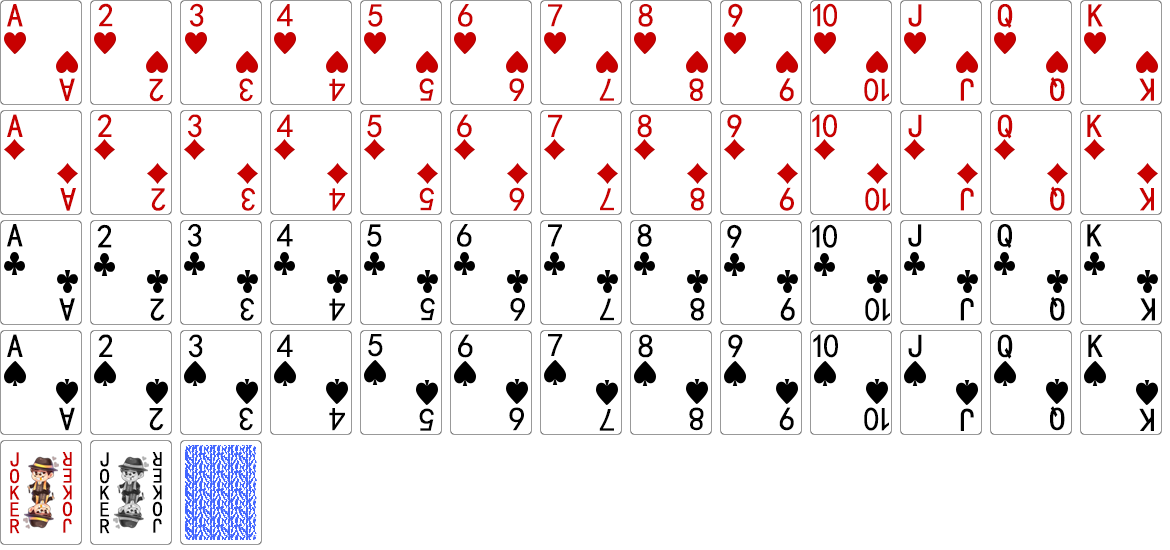
<style>
.page{position:relative;width:1170px;height:550px;background:#ffffff}
.page>*{position:absolute;margin:0}
.t1{font:33px "SimHei";color:#c80101}
.t2{font:33px "SimHei";letter-spacing:-0.14em;color:#c80101}
.t3{font:33px "SimHei";letter-spacing:-0.12em;color:#c80101}
.t4{font:33px "SimHei";color:#000000}
.t5{font:33px "SimHei";letter-spacing:-0.12em;color:#000000}
.t6{font:32.8px "SimHei";color:#000000}
.t7{font:20.8px/16.7px "SimHei";color:#c80101}
.t8{font:20.9px/16.7px "SimHei";color:#c80101}
.t9{font:20.8px/16.7px "SimHei";color:#000000}
.t10{font:20.9px/16.7px "SimHei";color:#000000}
</style>
<div class="page">
<p class="t1" style="left:7px;top:4px;width:16px;height:23px">A</p>
<p class="t1" style="left:98px;top:3px;width:15px;height:24px">2</p>
<p class="t1" style="left:189px;top:3px;width:15px;height:24px">3</p>
<p class="t1" style="left:277px;top:4px;width:16px;height:23px">4</p>
<p class="t1" style="left:368px;top:4px;width:15px;height:23px">5</p>
<p class="t1" style="left:458px;top:4px;width:15px;height:23px">6</p>
<p class="t1" style="left:548px;top:4px;width:15px;height:23px">7</p>
<p class="t1" style="left:638px;top:4px;width:15px;height:23px">8</p>
<p class="t1" style="left:728px;top:3px;width:15px;height:24px">9</p>
<p class="t2" style="left:813px;top:3px;width:24px;height:24px">10</p>
<p class="t1" style="left:908px;top:4px;width:14px;height:23px">J</p>
<p class="t1" style="left:997px;top:4px;width:16px;height:25px">Q</p>
<p class="t1" style="left:1088px;top:4px;width:15px;height:23px">K</p>
<p class="t1" style="left:59px;top:78px;width:16px;height:23px;rotate:180deg">A</p>
<p class="t1" style="left:149px;top:78px;width:15px;height:24px;rotate:180deg">2</p>
<p class="t1" style="left:239px;top:78px;width:14px;height:24px;rotate:180deg">3</p>
<p class="t1" style="left:329px;top:78px;width:16px;height:23px;rotate:180deg">4</p>
<p class="t1" style="left:419px;top:78px;width:15px;height:23px;rotate:180deg">5</p>
<p class="t1" style="left:509px;top:78px;width:15px;height:23px;rotate:180deg">6</p>
<p class="t1" style="left:599px;top:78px;width:15px;height:23px;rotate:180deg">7</p>
<p class="t1" style="left:689px;top:78px;width:15px;height:23px;rotate:180deg">8</p>
<p class="t1" style="left:779px;top:78px;width:15px;height:24px;rotate:180deg">9</p>
<p class="t3" style="left:864px;top:78px;width:25px;height:24px;rotate:180deg">10</p>
<p class="t1" style="left:960px;top:78px;width:14px;height:23px;rotate:180deg">J</p>
<p class="t1" style="left:1050px;top:76px;width:15px;height:25px;rotate:180deg">Q</p>
<p class="t1" style="left:1139px;top:78px;width:15px;height:23px;rotate:180deg">K</p>
<p class="t1" style="left:7px;top:114px;width:16px;height:23px">A</p>
<p class="t1" style="left:97px;top:114px;width:15px;height:23px">2</p>
<p class="t1" style="left:188px;top:114px;width:14px;height:24px">3</p>
<p class="t1" style="left:277px;top:114px;width:16px;height:23px">4</p>
<p class="t1" style="left:367px;top:114px;width:15px;height:24px">5</p>
<p class="t1" style="left:457px;top:114px;width:15px;height:24px">6</p>
<p class="t1" style="left:548px;top:114px;width:15px;height:23px">7</p>
<p class="t1" style="left:637px;top:114px;width:15px;height:24px">8</p>
<p class="t1" style="left:727px;top:114px;width:15px;height:24px">9</p>
<p class="t3" style="left:812px;top:114px;width:25px;height:24px">10</p>
<p class="t1" style="left:908px;top:114px;width:14px;height:24px">J</p>
<p class="t1" style="left:997px;top:114px;width:16px;height:25px">Q</p>
<p class="t1" style="left:1087px;top:114px;width:15px;height:23px">K</p>
<p class="t1" style="left:60px;top:188px;width:16px;height:23px;rotate:180deg">A</p>
<p class="t1" style="left:151px;top:188px;width:15px;height:23px;rotate:180deg">2</p>
<p class="t1" style="left:241px;top:188px;width:14px;height:23px;rotate:180deg">3</p>
<p class="t1" style="left:329px;top:188px;width:16px;height:23px;rotate:180deg">4</p>
<p class="t1" style="left:419px;top:187px;width:15px;height:24px;rotate:180deg">5</p>
<p class="t1" style="left:509px;top:187px;width:16px;height:24px;rotate:180deg">6</p>
<p class="t1" style="left:600px;top:188px;width:14px;height:23px;rotate:180deg">7</p>
<p class="t1" style="left:690px;top:187px;width:15px;height:24px;rotate:180deg">8</p>
<p class="t1" style="left:779px;top:187px;width:15px;height:24px;rotate:180deg">9</p>
<p class="t3" style="left:865px;top:187px;width:25px;height:24px;rotate:180deg">10</p>
<p class="t1" style="left:960px;top:187px;width:14px;height:24px;rotate:180deg">J</p>
<p class="t1" style="left:1050px;top:186px;width:15px;height:25px;rotate:180deg">Q</p>
<p class="t1" style="left:1139px;top:188px;width:15px;height:23px;rotate:180deg">K</p>
<p class="t4" style="left:7px;top:224px;width:16px;height:23px">A</p>
<p class="t4" style="left:97px;top:224px;width:15px;height:24px">2</p>
<p class="t4" style="left:187px;top:224px;width:15px;height:23px">3</p>
<p class="t4" style="left:277px;top:224px;width:16px;height:23px">4</p>
<p class="t4" style="left:367px;top:224px;width:15px;height:23px">5</p>
<p class="t4" style="left:457px;top:224px;width:15px;height:23px">6</p>
<p class="t4" style="left:548px;top:224px;width:14px;height:23px">7</p>
<p class="t4" style="left:637px;top:224px;width:15px;height:23px">8</p>
<p class="t4" style="left:727px;top:224px;width:15px;height:24px">9</p>
<p class="t5" style="left:812px;top:224px;width:25px;height:24px">10</p>
<p class="t4" style="left:908px;top:224px;width:14px;height:23px">J</p>
<p class="t4" style="left:997px;top:224px;width:15px;height:25px">Q</p>
<p class="t4" style="left:1087px;top:224px;width:15px;height:23px">K</p>
<p class="t6" style="left:59px;top:298px;width:16px;height:23px;rotate:180deg">A</p>
<p class="t6" style="left:150px;top:298px;width:15px;height:23px;rotate:180deg">2</p>
<p class="t6" style="left:240px;top:298px;width:14px;height:23px;rotate:180deg">3</p>
<p class="t6" style="left:329px;top:298px;width:16px;height:23px;rotate:180deg">4</p>
<p class="t6" style="left:420px;top:298px;width:15px;height:23px;rotate:180deg">5</p>
<p class="t6" style="left:510px;top:298px;width:15px;height:23px;rotate:180deg">6</p>
<p class="t6" style="left:600px;top:298px;width:14px;height:23px;rotate:180deg">7</p>
<p class="t6" style="left:690px;top:298px;width:15px;height:23px;rotate:180deg">8</p>
<p class="t6" style="left:780px;top:298px;width:15px;height:23px;rotate:180deg">9</p>
<p class="t5" style="left:865px;top:298px;width:25px;height:23px;rotate:180deg">10</p>
<p class="t6" style="left:960px;top:298px;width:14px;height:23px;rotate:180deg">J</p>
<p class="t6" style="left:1050px;top:296px;width:15px;height:25px;rotate:180deg">Q</p>
<p class="t6" style="left:1140px;top:298px;width:15px;height:23px;rotate:180deg">K</p>
<p class="t4" style="left:7px;top:334px;width:16px;height:23px">A</p>
<p class="t4" style="left:98px;top:334px;width:15px;height:23px">2</p>
<p class="t4" style="left:188px;top:334px;width:15px;height:24px">3</p>
<p class="t4" style="left:277px;top:334px;width:16px;height:23px">4</p>
<p class="t4" style="left:368px;top:334px;width:15px;height:23px">5</p>
<p class="t4" style="left:458px;top:334px;width:15px;height:24px">6</p>
<p class="t4" style="left:548px;top:334px;width:15px;height:22px">7</p>
<p class="t4" style="left:638px;top:334px;width:15px;height:24px">8</p>
<p class="t4" style="left:728px;top:334px;width:15px;height:24px">9</p>
<p class="t5" style="left:813px;top:334px;width:25px;height:24px">10</p>
<p class="t4" style="left:908px;top:334px;width:14px;height:24px">J</p>
<p class="t4" style="left:997px;top:334px;width:16px;height:25px">Q</p>
<p class="t4" style="left:1088px;top:334px;width:15px;height:23px">K</p>
<p class="t6" style="left:59px;top:407px;width:16px;height:24px;rotate:180deg">A</p>
<p class="t6" style="left:149px;top:408px;width:15px;height:23px;rotate:180deg">2</p>
<p class="t6" style="left:239px;top:407px;width:14px;height:24px;rotate:180deg">3</p>
<p class="t6" style="left:329px;top:408px;width:16px;height:23px;rotate:180deg">4</p>
<p class="t6" style="left:419px;top:408px;width:15px;height:23px;rotate:180deg">5</p>
<p class="t6" style="left:509px;top:407px;width:15px;height:24px;rotate:180deg">6</p>
<p class="t6" style="left:599px;top:409px;width:15px;height:22px;rotate:180deg">7</p>
<p class="t6" style="left:689px;top:407px;width:15px;height:24px;rotate:180deg">8</p>
<p class="t6" style="left:779px;top:407px;width:15px;height:24px;rotate:180deg">9</p>
<p class="t5" style="left:864px;top:407px;width:25px;height:24px;rotate:180deg">10</p>
<p class="t6" style="left:960px;top:408px;width:14px;height:23px;rotate:180deg">J</p>
<p class="t6" style="left:1050px;top:406px;width:15px;height:25px;rotate:180deg">Q</p>
<p class="t6" style="left:1139px;top:408px;width:15px;height:23px;rotate:180deg">K</p>
<p class="t7" style="left:10px;top:452px;width:10px;height:82px;text-align:right">J<br>O<br>K<br>E<br>R</p>
<p class="t8" style="left:62px;top:452px;width:10px;height:81px;text-align:right;rotate:180deg">J<br>O<br>K<br>E<br>R</p>
<p class="t9" style="left:100px;top:452px;width:10px;height:82px;text-align:right">J<br>O<br>K<br>E<br>R</p>
<p class="t10" style="left:152px;top:452px;width:10px;height:81px;text-align:right;rotate:180deg">J<br>O<br>K<br>E<br>R</p>
</div>
